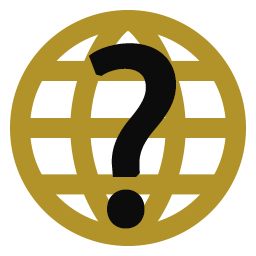
<style>
.page{position:relative;width:256px;height:256px;background:#ffffff}
.page>*{position:absolute;margin:0}
.t1{font:256px "MyriadPro-Regular";color:#0c0c0c;font-weight:bold}
</style>
<div class="page">
<p class="t1" style="left:88px;top:43px;width:88px;height:186px">?</p>
</div>
